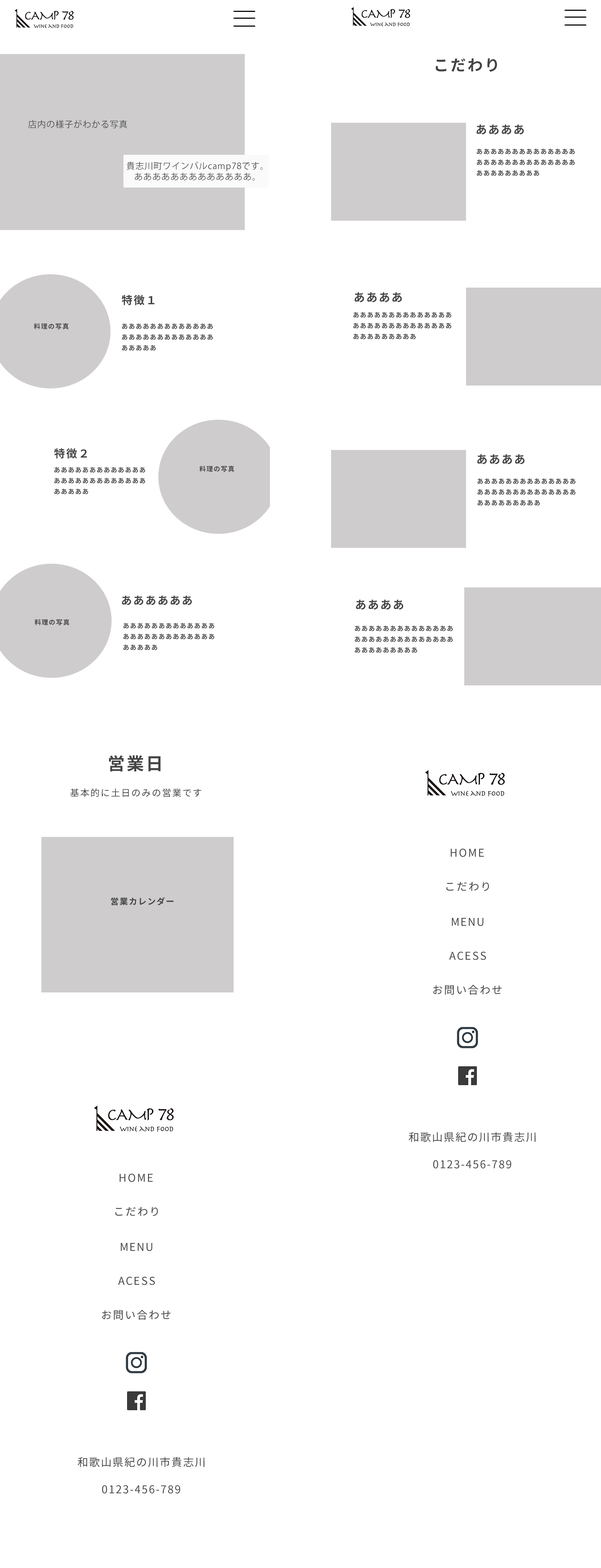
<style>
.page{position:relative;width:601px;height:1568px;background:#ffffff}
.page>*{position:absolute;margin:0}
.t1{font:15.5px "NotoSansCJKjp-Bold";letter-spacing:0.1em;color:#444444}
.t2{font:8.6px "KozGoPr6N-Regular";letter-spacing:0.05em;color:#444444}
.t3{font:11.5px "NotoSansCJKjp-Bold";letter-spacing:0.1em;color:#444444}
.t4{font:6.5px/10.8px "NotoSansCJKjp-Bold";letter-spacing:0.1em;color:#444444}
.t5{font:8.6px/10.8px "KozGoPr6N-Regular";letter-spacing:0.05em;color:#444444}
.t6{font:11px "NotoSansCJKjp-Bold";letter-spacing:0.1em;color:#444444}
.t7{font:6.5px "NotoSansCJKjp-Bold";letter-spacing:0.1em;color:#444444}
.t8{font:17.4px "NotoSansCJKjp-Bold";letter-spacing:0.1em;color:#444444}
.t9{font:9.3px "NotoSansCJKjp-Regular";letter-spacing:0.1em;color:#444444}
.t10{font:10.8px "NotoSansCJKjp-Regular";letter-spacing:0.1em;color:#444444}
.t11{font:8.4px "NotoSansCJKjp-Bold";letter-spacing:0.1em;color:#444444}
</style>
<div class="page">
<p class="t1" style="left:436px;top:58px;width:61px;height:14px">こだわり</p>
<p class="t2" style="left:28px;top:120px;width:99px;height:9px">店内の様子がわかる写真</p>
<p class="t3" style="left:477px;top:125px;width:47px;height:10px">ああああ</p>
<p class="t4" style="left:477px;top:149px;width:98px;height:27px">ああああああああああああああ<br>ああああああああああああああ<br>あああああああああ</p>
<p class="t5" style="left:127px;top:162px;width:136px;height:19px;text-align:center">貴志川町ワインバルcamp78です。<br>あああああああああああああ。</p>
<p class="t3" style="left:355px;top:292px;width:47px;height:10px">ああああ</p>
<p class="t6" style="left:122px;top:295px;width:32px;height:10px">特徴１</p>
<p class="t4" style="left:353px;top:312px;width:98px;height:27px">ああああああああああああああ<br>ああああああああああああああ<br>あああああああああ</p>
<p class="t7" style="left:34px;top:323px;width:35px;height:6px">料理の写真</p>
<p class="t4" style="left:122px;top:323px;width:91px;height:28px">あああああああああああああ<br>あああああああああああああ<br>あああああ</p>
<p class="t6" style="left:54px;top:448px;width:33px;height:11px">特徴２</p>
<p class="t3" style="left:477px;top:454px;width:48px;height:10px">ああああ</p>
<p class="t4" style="left:54px;top:467px;width:91px;height:28px">あああああああああああああ<br>あああああああああああああ<br>あああああ</p>
<p class="t7" style="left:199px;top:466px;width:35px;height:6px">料理の写真</p>
<p class="t4" style="left:478px;top:478px;width:98px;height:28px">ああああああああああああああ<br>ああああああああああああああ<br>あああああああああ</p>
<p class="t6" style="left:122px;top:595px;width:70px;height:10px">ああああああ</p>
<p class="t3" style="left:356px;top:600px;width:48px;height:10px">ああああ</p>
<p class="t7" style="left:35px;top:619px;width:34px;height:6px">料理の写真</p>
<p class="t4" style="left:123px;top:623px;width:92px;height:27px">あああああああああああああ<br>あああああああああああああ<br>あああああ</p>
<p class="t4" style="left:355px;top:626px;width:98px;height:27px">ああああああああああああああ<br>ああああああああああああああ<br>あああああああああ</p>
<p class="t8" style="left:109px;top:755px;width:52px;height:17px">営業日</p>
<p class="t9" style="left:70px;top:788px;width:132px;height:9px">基本的に土日のみの営業です</p>
<p class="t10" style="left:451px;top:848px;width:33px;height:9px">HOME</p>
<p class="t10" style="left:446px;top:882px;width:43px;height:9px">こだわり</p>
<p class="t11" style="left:111px;top:897px;width:63px;height:8px">営業カレンダー</p>
<p class="t10" style="left:452px;top:918px;width:31px;height:8px">MENU</p>
<p class="t10" style="left:449px;top:951px;width:37px;height:9px">ACESS</p>
<p class="t10" style="left:433px;top:985px;width:69px;height:10px">お問い合わせ</p>
<p class="t10" style="left:409px;top:1132px;width:127px;height:10px">和歌山県紀の川市貴志川</p>
<p class="t10" style="left:433px;top:1160px;width:79px;height:8px">0123-456-789</p>
<p class="t10" style="left:120px;top:1173px;width:33px;height:9px">HOME</p>
<p class="t10" style="left:115px;top:1207px;width:43px;height:9px">こだわり</p>
<p class="t10" style="left:121px;top:1243px;width:31px;height:8px">MENU</p>
<p class="t10" style="left:118px;top:1276px;width:37px;height:9px">ACESS</p>
<p class="t10" style="left:102px;top:1310px;width:69px;height:10px">お問い合わせ</p>
<p class="t10" style="left:77px;top:1457px;width:127px;height:10px">和歌山県紀の川市貴志川</p>
<p class="t10" style="left:102px;top:1485px;width:78px;height:8px">0123-456-789</p>
</div>
